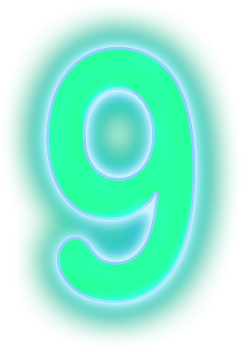
<style>
.page{position:relative;width:242px;height:350px}
.page>*{position:absolute;margin:0}
.t1{font:360px "AGBuchRoundedCondensedBQ-BoldOutline";letter-spacing:0.025em;color:#28ffa4;scale:0.83 1}
</style>
<div class="page">
<p class="t1" style="left:46px;top:46px;width:150px;height:258px">9</p>
<p class="t1" style="left:46px;top:46px;width:150px;height:258px">9</p>
<p class="t1" style="left:46px;top:46px;width:150px;height:258px">9</p>
</div>
